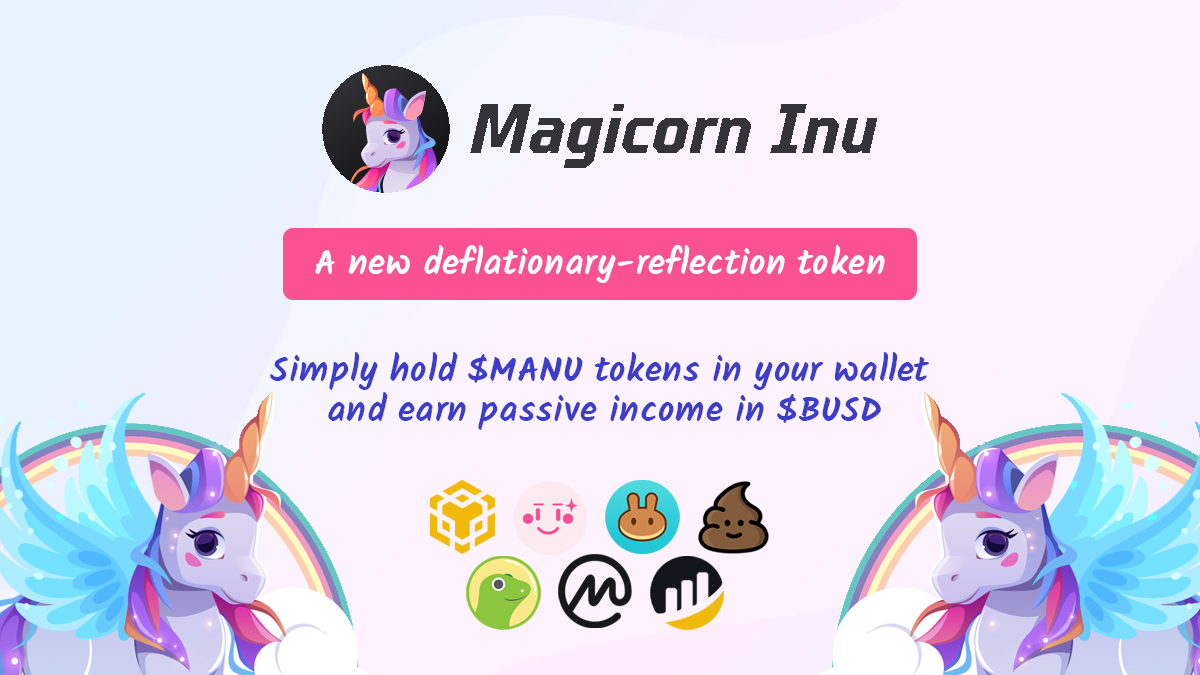
<style>
.page{position:relative;width:1200px;height:675px;background:#fef2fe}
.page>*{position:absolute;margin:0}
.t1{font:36px "Kalam-Bold";letter-spacing:0.025em;color:#ffffff}
.t2{font:36px/40px "Kalam-Bold";letter-spacing:0.025em;color:#3d3dcb}
</style>
<div class="page">
<p class="t1" style="left:315px;top:245px;width:570px;height:38px">A new deflationary-reflection token</p>
<p class="t2" style="left:270px;top:352px;width:659px;height:78px;text-align:center">Simply hold $MANU tokens in your wallet <br>and earn passive income in $BUSD</p>
</div>
